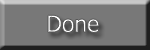
<style>
.page{position:relative;width:150px;height:50px;background:#787878}
.page>*{position:absolute;margin:0}
.t1{font:22.9px "Tahoma"}
</style>
<div class="page">
<p class="t1" style="left:48px;top:15px;width:51px;height:18px">Done</p>
</div>
